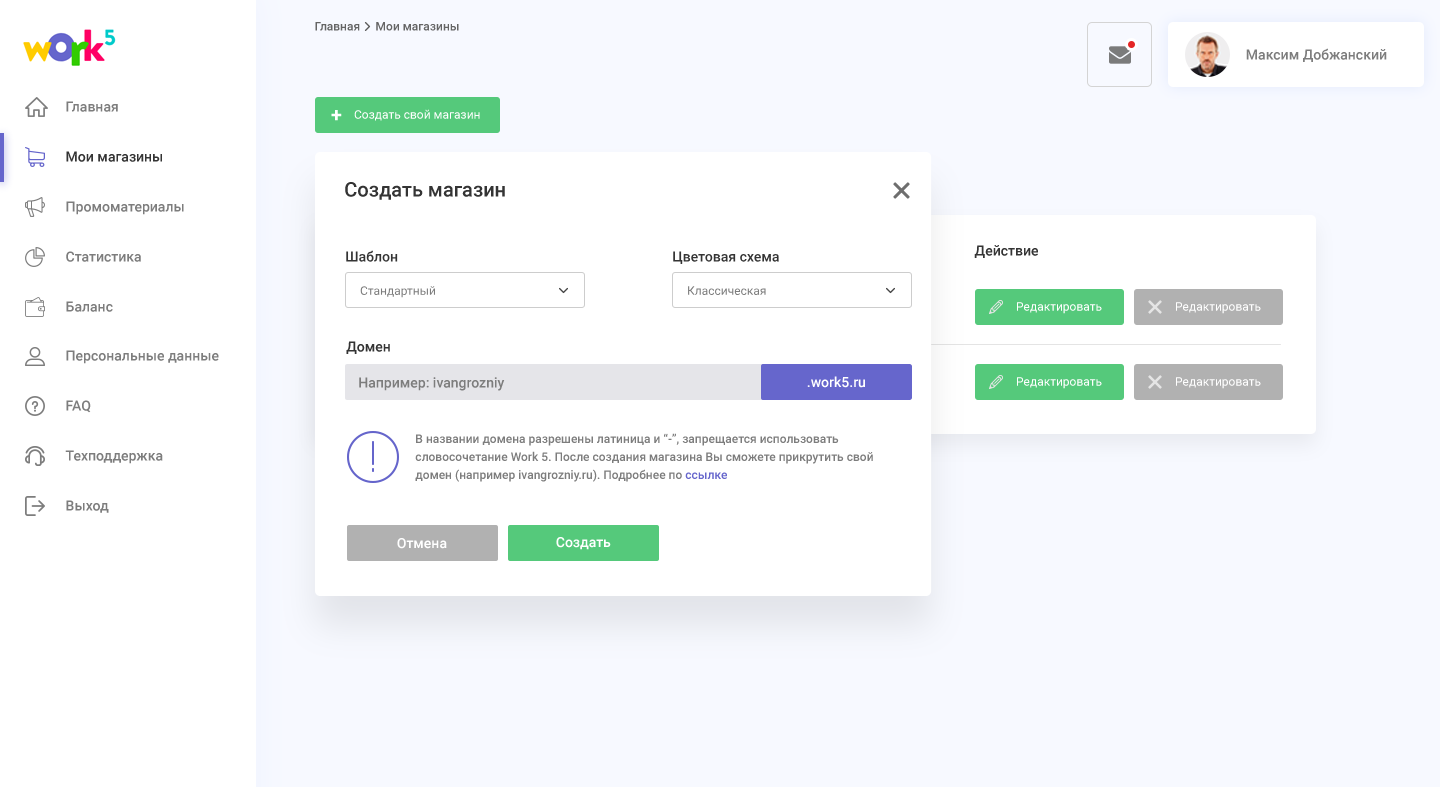
<style>
.page{position:relative;width:1440px;height:787px;background:#ffffff}
.page>*{position:absolute;margin:0}
.t1{font:12px "Roboto-Medium";color:#656565}
.t2{font:14px "Roboto-Medium";color:#7d7d7d}
.t3{font:20px "Roboto-Bold";color:#ffffff}
.t4{font:12px "Roboto-Regular";color:#ffffff}
.t5{font:14px "Roboto-Medium";color:#343434}
.t6{font:20px "Roboto-Medium";color:#343434}
.t7{font:12px "Roboto-Regular";color:#7c7c7c}
.t8{font:14px "Roboto-Medium";color:#ffffff}
.t9{font:12px/18px "Roboto-Medium";color:#7d7d7d}
.t10{font:12px/18px "Roboto-Medium";color:#6666cc}
</style>
<div class="page">
<p class="t1" style="left:315px;top:22px;width:45px;height:9px">Главная</p>
<p class="t1" style="left:376px;top:22px;width:83px;height:9px">Мои магазины</p>
<p class="t2" style="left:1246px;top:48px;width:141px;height:14px">Максим Добжанский</p>
<p class="t2" style="left:66px;top:101px;width:52px;height:11px">Главная</p>
<p class="t3" style="left:331px;top:110px;width:11px;height:11px">+</p>
<p class="t4" style="left:354px;top:109px;width:126px;height:12px">Создать свой магазин</p>
<p class="t5" style="left:66px;top:151px;width:96px;height:11px">Мои магазины</p>
<p class="t6" style="left:345px;top:182px;width:160px;height:18px">Создать магазин</p>
<p class="t2" style="left:66px;top:201px;width:118px;height:14px">Промоматериалы</p>
<p class="t5" style="left:974px;top:245px;width:64px;height:13px">Действие</p>
<p class="t2" style="left:66px;top:251px;width:75px;height:11px">Статистика</p>
<p class="t5" style="left:346px;top:250px;width:52px;height:12px">Шаблон</p>
<p class="t5" style="left:673px;top:251px;width:106px;height:13px">Цветовая схема</p>
<p class="t7" style="left:360px;top:286px;width:76px;height:12px">Стандартный</p>
<p class="t7" style="left:688px;top:286px;width:78px;height:9px">Классическая</p>
<p class="t2" style="left:66px;top:301px;width:47px;height:11px">Баланс</p>
<p class="t4" style="left:1017px;top:302px;width:85px;height:12px">Редактировать</p>
<p class="t4" style="left:1176px;top:302px;width:85px;height:12px">Редактировать</p>
<p class="t5" style="left:346px;top:341px;width:44px;height:13px">Домен</p>
<p class="t2" style="left:66px;top:350px;width:153px;height:14px">Персональные данные</p>
<p class="t2" style="left:359px;top:377px;width:146px;height:14px">Например: ivangrozniy</p>
<p class="t8" style="left:807px;top:376px;width:58px;height:12px">.work5.ru</p>
<p class="t4" style="left:1017px;top:377px;width:85px;height:12px">Редактировать</p>
<p class="t4" style="left:1176px;top:377px;width:85px;height:12px">Редактировать</p>
<p class="t2" style="left:66px;top:400px;width:25px;height:13px">FAQ</p>
<p class="t9" style="left:415px;top:433px;width:458px;height:49px">В названии домена разрешены латиница и “-”, запрещается использовать словосочетание Work 5. После создания магазина Вы сможете прикрутить свой домен (например ivangrozniy.ru). Подробнее по <span class="t10">ссылке</span></p>
<p class="t2" style="left:65px;top:450px;width:98px;height:14px">Техподдержка</p>
<p class="t2" style="left:66px;top:500px;width:43px;height:13px">Выход</p>
<p class="t8" style="left:397px;top:538px;width:50px;height:11px">Отмена</p>
<p class="t8" style="left:556px;top:537px;width:55px;height:13px">Создать</p>
</div>
